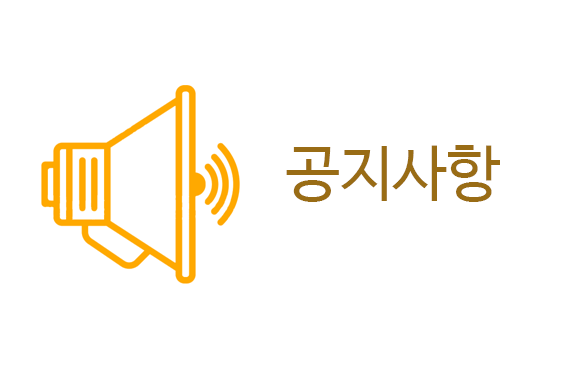
<style>
.page{position:relative;width:570px;height:370px;background:#ffffff}
.page>*{position:absolute;margin:0}
.t1{font:60px "NanumBarunGothic";color:#996c15}
</style>
<div class="page">
<p class="t1" style="left:286px;top:145px;width:214px;height:57px">공지사항</p>
</div>
